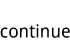
<style>
.page{position:relative;width:70px;height:55px;background:#ffffff}
.page>*{position:absolute;margin:0}
.t1{font:18px "DroidSans";color:#000000}
</style>
<div class="page">
<p class="t1" style="left:0px;top:24px;width:70px;height:14px">continue</p>
</div>
